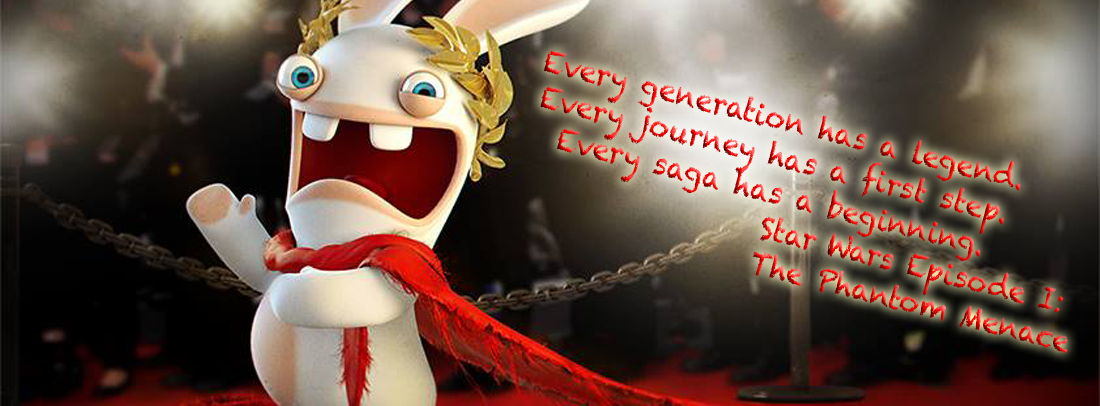
<style>
.page{position:relative;width:1100px;height:406px}
.page>*{position:absolute;margin:0}
.t1{font:30.5px "Chalkduster";scale:0.9 1}
</style>
<div class="page">
<p class="t1" style="left:540px;top:50px;width:528px;height:303px;text-align:center;rotate:14deg">Every generation has a legend. <br>Every journey has a first step. <br>Every saga has a beginning.<br>Star Wars Episode I: <br>The Phantom Menace</p>
</div>
